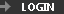
<style>
.page{position:relative;width:64px;height:14px;background:#333333}
.page>*{position:absolute;margin:0}
.t1{font:11px "Ebrima-Bold";color:#fcfbfb}
</style>
<div class="page">
<p class="t1" style="left:22px;top:3px;width:32px;height:8px">LOGIN</p>
</div>
